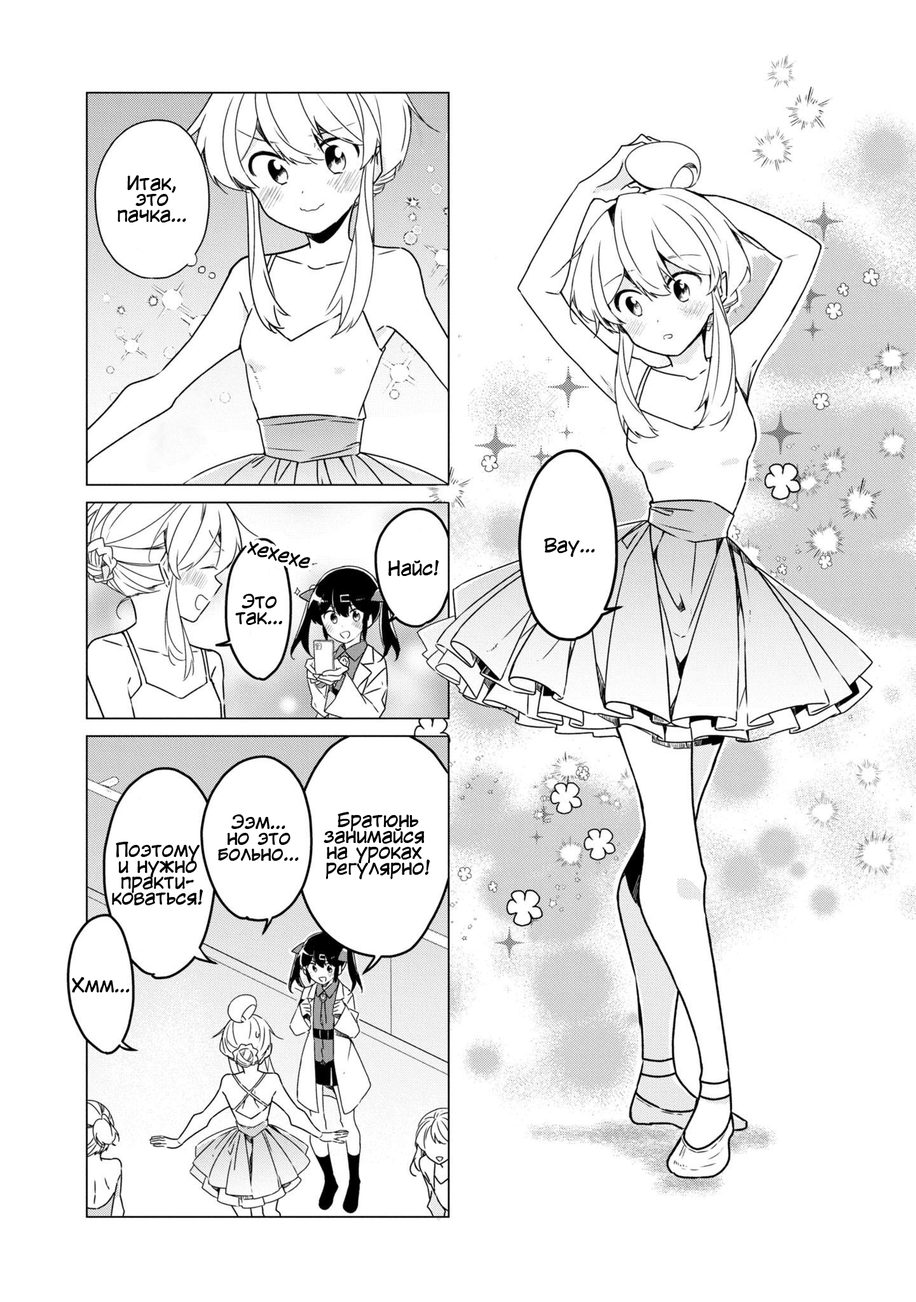
<style>
.page{position:relative;width:916px;height:1302px;background:#ffffff}
.page>*{position:absolute;margin:0}
.t1{font:19.1px/15.9px "KuraiVoice2";color:#000000}
.t2{font:19.1px "KuraiVoice2";color:#000000}
</style>
<div class="page">
<p class="t1" style="left:118px;top:175px;width:68px;height:47px;text-align:center">Итак,<br>это<br>пачка...</p>
<p class="t2" style="left:247px;top:541px;width:63px;height:27px;rotate:15deg">хехехе</p>
<p class="t2" style="left:544px;top:538px;width:51px;height:19px">Вау...</p>
<p class="t2" style="left:388px;top:560px;width:51px;height:17px">Найс!</p>
<p class="t1" style="left:235px;top:594px;width:47px;height:31px;text-align:center">Это<br>так...</p>
<p class="t1" style="left:218px;top:814px;width:81px;height:47px;text-align:center">Ээм...<br>но это<br>больно...</p>
<p class="t1" style="left:324px;top:812px;width:106px;height:67px;text-align:center">Братюнь<br>занимайся <br>на уроках <br>регулярно!</p>
<p class="t1" style="left:112px;top:842px;width:91px;height:63px;text-align:center">Поэтому<br>и нужно<br>практи-<br>коваться!</p>
<p class="t2" style="left:72px;top:977px;width:58px;height:15px">Хмм...</p>
</div>
